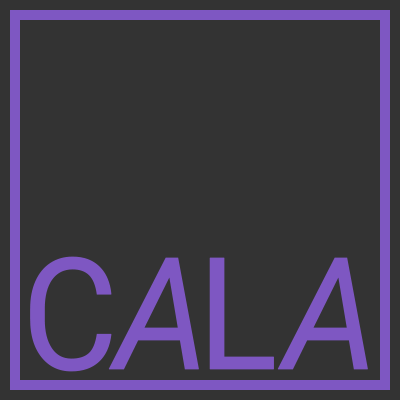
<style>
.page{position:relative;width:400px;height:400px;background:#333333}
.page>*{position:absolute;margin:0}
.t1{font:156.2px "Roboto-Regular";letter-spacing:-0.05em;color:#7e57c2;font-weight:bold;scale:0.94 1}
.t2{font:156.2px "Roboto-Italic";letter-spacing:-0.1em;color:#7e57c2;font-weight:bold;scale:0.94 1}
.t3{font:156.2px "Roboto-Regular";letter-spacing:0.02em;color:#7e57c2;font-weight:bold;scale:0.94 1}
.t4{font:156.2px "Roboto-Italic";color:#7e57c2;font-weight:bold;scale:0.94 1}
</style>
<div class="page">
<p class="t1" style="left:30px;top:256px;width:338px;height:116px">C<span class="t2">A</span><span class="t3">L</span><span class="t4">A</span></p>
</div>
